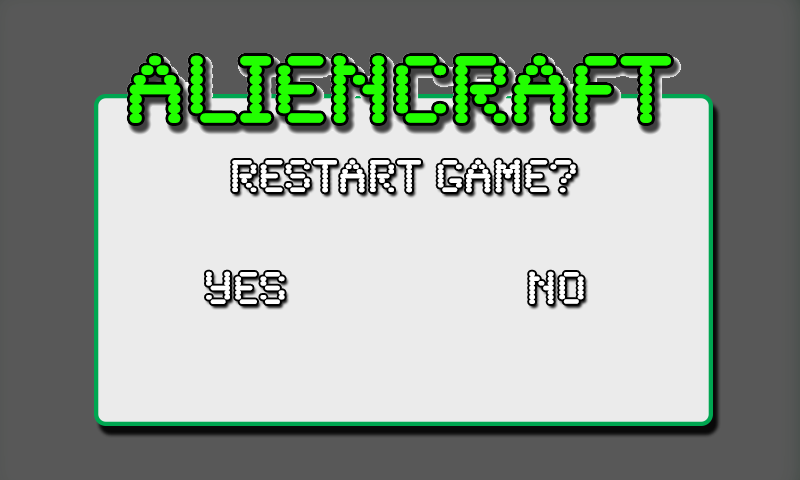
<style>
.page{position:relative;width:800px;height:480px;background:#ebebeb}
.page>*{position:absolute;margin:0}
.t1{font:48px "SynchroLET";color:#ffffff}
.t2{font:47.7px "SynchroLET";color:#ffffff}
</style>
<div class="page">
<p class="t1" style="left:232px;top:159px;width:344px;height:34px">RESTART GAME?</p>
<p class="t1" style="left:206px;top:271px;width:79px;height:33px">YES</p>
<p class="t2" style="left:529px;top:271px;width:55px;height:33px">NO</p>
</div>
